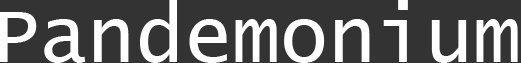
<style>
.page{position:relative;width:521px;height:63px;background:#333333}
.page>*{position:absolute;margin:0}
.t1{font:80px "LucidaConsole";color:#ffffff}
</style>
<div class="page">
<p class="t1" style="left:0px;top:0px;width:518px;height:63px">Pandemonium</p>
</div>
